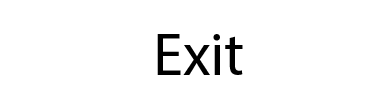
<style>
.page{position:relative;width:384px;height:100px;background:#ffffff}
.page>*{position:absolute;margin:0}
.t1{font:60px "MyriadPro-Regular";color:#000000}
</style>
<div class="page">
<p class="t1" style="left:157px;top:34px;width:86px;height:41px">Exit</p>
</div>
